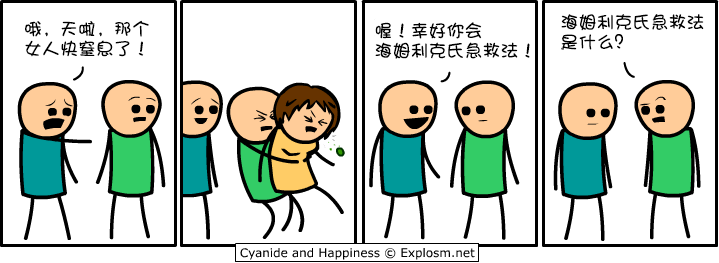
<style>
.page{position:relative;width:719px;height:263px;background:#ffffff}
.page>*{position:absolute;margin:0}
.t1{font:18px/20px "DFPShaoNvW5";color:#000000}
</style>
<div class="page">
<p class="t1" style="left:561px;top:14px;width:143px;height:36px">海姆利克氏急救法<br>是什么？</p>
<p class="t1" style="left:25px;top:20px;width:124px;height:37px">哦，天啦，那个<br>女人快窒息了！</p>
<p class="t1" style="left:375px;top:22px;width:155px;height:37px">喔！幸好你会<br>海姆利克氏急救法！</p>
</div>
